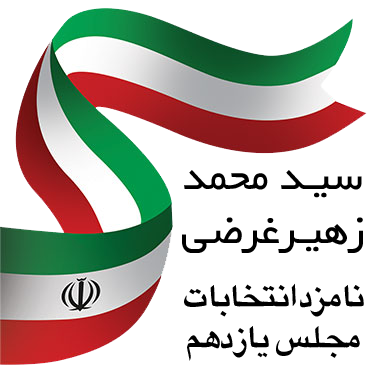
<style>
.page{position:relative;width:367px;height:370px;background:#ffffff}
.page>*{position:absolute;margin:0}
.t1{font:47.8px/53.5px "XYekan";color:#000000}
.t2{font:36.7px/41.1px "XGity";color:#000000}
</style>
<div class="page">
<p class="t1" style="left:182px;top:170px;width:181px;height:83px;text-align:center">سیـد محمد<br>زهیـر غرضی</p>
<p class="t2" style="left:184px;top:283px;width:180px;height:78px;text-align:center">نامزد انتخابات<br>مجلس یازدهم</p>
</div>
